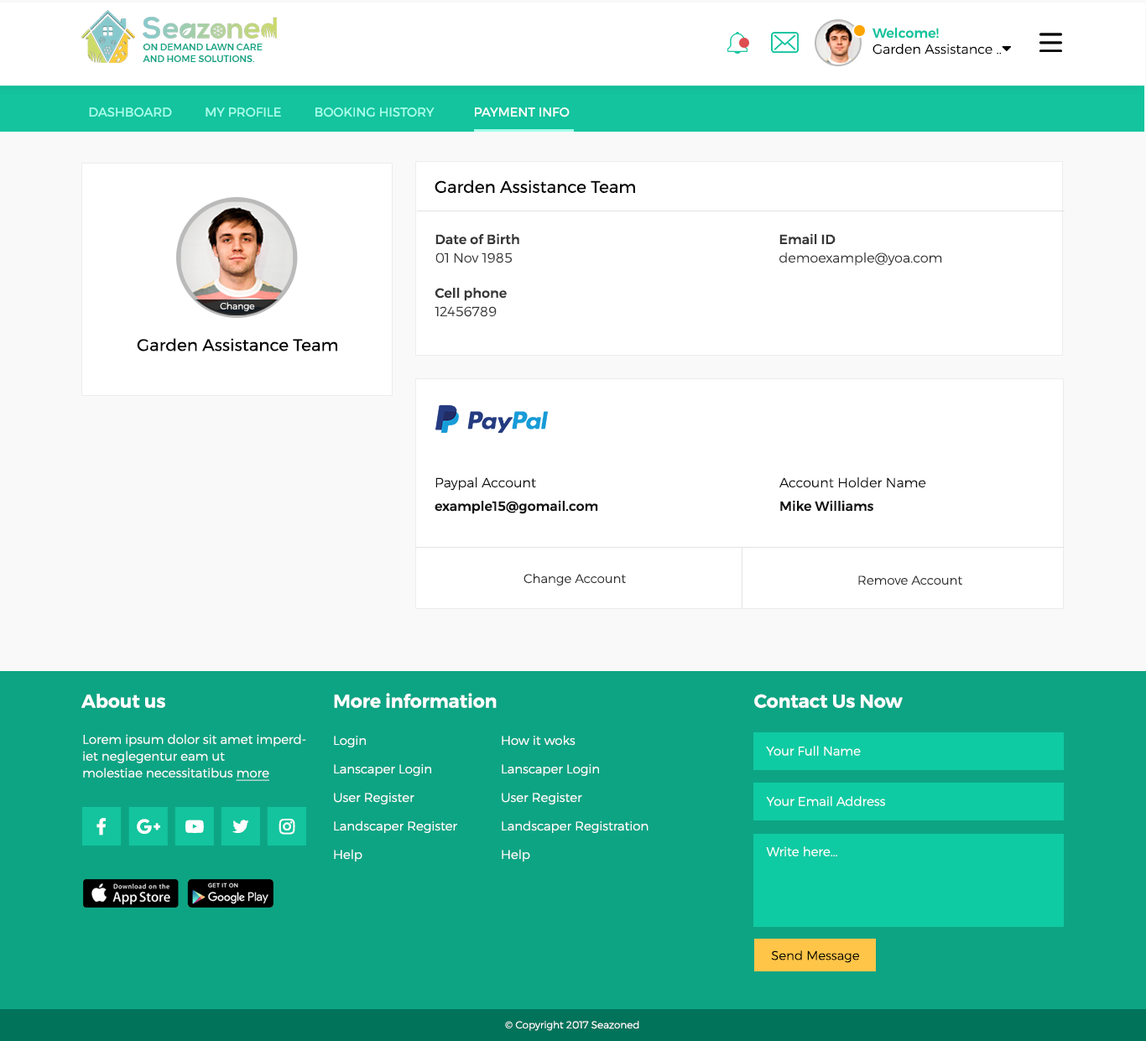
<style>
.page{position:relative;width:1146px;height:1041px;background:#ffffff}
.page>*{position:absolute;margin:0}
.t1{font:13.4px "Montserrat-Light";color:#000000}
.t2{font:13.4px "Montserrat-Medium";color:#13c49e}
.t3{font:9.2px "Montserrat-Medium";color:#0da484;text-transform:uppercase}
.t4{font:12.6px "Montserrat-Regular";color:#a6feeb;text-transform:uppercase}
.t5{font:12.6px "Montserrat-Regular";color:#ffffff;text-transform:uppercase}
.t6{font:16.8px "Montserrat-Regular";color:#000000}
.t7{font:13.4px/18.5px "Montserrat-Medium";color:#383838}
.t8{font:13.4px/18.5px "Montserrat-Light";color:#383838}
.t9{font:9.1px "Montserrat-Light";color:#ffffff}
.t10{font:13.4px/23.5px "Montserrat-Medium";color:#121212}
.t11{font:13.4px/23.5px "Montserrat-Light";color:#121212}
.t12{font:12.6px "Montserrat-Light";color:#2f2f2f}
.t13{font:18.5px "Montserrat-SemiBold";color:#ffffff}
.t14{font:12.6px/16.8px "Montserrat-Light";color:#ffffff}
.t15{font:12.6px/16.8px "Montserrat-Light";color:#ffffff;text-decoration:underline}
.t16{font:12.6px/28.5px "Montserrat-Light";color:#ffffff}
.t17{font:12.6px "Montserrat-Light";color:#ffffff}
.t18{font:12.6px "Montserrat-Light";color:#000000}
.t19{font:10.1px "Montserrat-Light";color:#ffffff}
</style>
<div class="page">
<p class="t1" style="left:872px;top:28px;width:129px;height:27px"><span class="t2">Welcome! <br></span>Garden Assistance ..</p>
<p class="t3" style="left:143px;top:44px;width:120px;height:18px">on demand lawn care <br>and home solutions.</p>
<p class="t4" style="left:89px;top:107px;width:480px;height:10px">DASHBOARD          MY PROFILE          booking history           <span class="t5"> payment info</span></p>
<p class="t6" style="left:434px;top:180px;width:201px;height:14px">Garden Assistance Team</p>
<p class="t7" style="left:435px;top:233px;width:84px;height:30px">Date of Birth<br><span class="t8">01 Nov 1985</span></p>
<p class="t8" style="left:779px;top:233px;width:163px;height:33px"><span class="t7">Email ID<br></span>demoexample@yoa.com</p>
<p class="t7" style="left:434px;top:288px;width:73px;height:29px">Cell phone<br><span class="t8">12456789</span></p>
<p class="t9" style="left:220px;top:302px;width:35px;height:9px">Change</p>
<p class="t6" style="left:137px;top:338px;width:200px;height:13px">Garden Assistance Team</p>
<p class="t10" style="left:434px;top:477px;width:164px;height:37px"><span class="t11">Paypal Account<br></span>example15@gomail.com</p>
<p class="t11" style="left:779px;top:477px;width:147px;height:35px">Account Holder Name<br><span class="t10">Mike Williams</span></p>
<p class="t12" style="left:523px;top:573px;width:103px;height:12px">Change Account</p>
<p class="t12" style="left:858px;top:575px;width:104px;height:10px">Remove Account</p>
<p class="t13" style="left:81px;top:694px;width:84px;height:14px">About us</p>
<p class="t13" style="left:334px;top:693px;width:163px;height:15px">More information</p>
<p class="t13" style="left:754px;top:694px;width:148px;height:14px">Contact Us Now</p>
<p class="t14" style="left:83px;top:734px;width:223px;height:47px">Lorem ipsum dolor sit amet imperdiet neglegentur eam ut<br>molestiae necessitatibus <span class="t15">more</span></p>
<p class="t16" style="left:334px;top:736px;width:123px;height:125px">Login<br>Lanscaper Login<br>User Register<br>Landscaper Register<br>Help</p>
<p class="t16" style="left:502px;top:735px;width:146px;height:126px">How it woks<br>Lanscaper Login<br>User Register<br>Landscaper Registration<br>Help</p>
<p class="t17" style="left:766px;top:746px;width:95px;height:10px">Your Full Name</p>
<p class="t17" style="left:766px;top:796px;width:119px;height:10px">Your Email Address</p>
<p class="t17" style="left:766px;top:846px;width:71px;height:10px">Write here...</p>
<p class="t18" style="left:771px;top:950px;width:88px;height:13px">Send Message</p>
<p class="t19" style="left:505px;top:1021px;width:134px;height:10px">© Copyright 2017 Seazoned</p>
</div>
